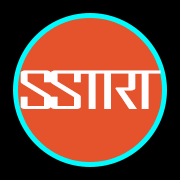
<style>
.page{position:relative;width:180px;height:180px;background:#000000}
.page>*{position:absolute;margin:0}
.t1{font:50.3px "AgencyFB-Reg";letter-spacing:-0.12em;color:#fffefe;scale:2 1}
</style>
<div class="page">
<p class="t1" style="left:20px;top:70px;width:141px;height:39px">SSTRT</p>
</div>
